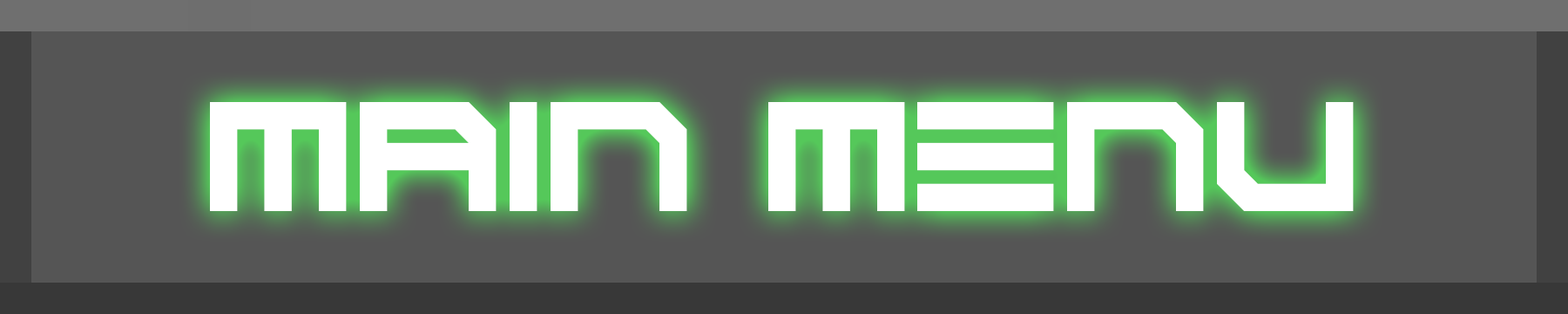
<style>
.page{position:relative;width:1568px;height:314px;background:#555555}
.page>*{position:absolute;margin:0}
.t1{font:108.9px "ScifiAdventure";color:#ffffff}
</style>
<div class="page">
<p class="t1" style="left:210px;top:102px;width:1144px;height:109px">MAIN MENU</p>
</div>
